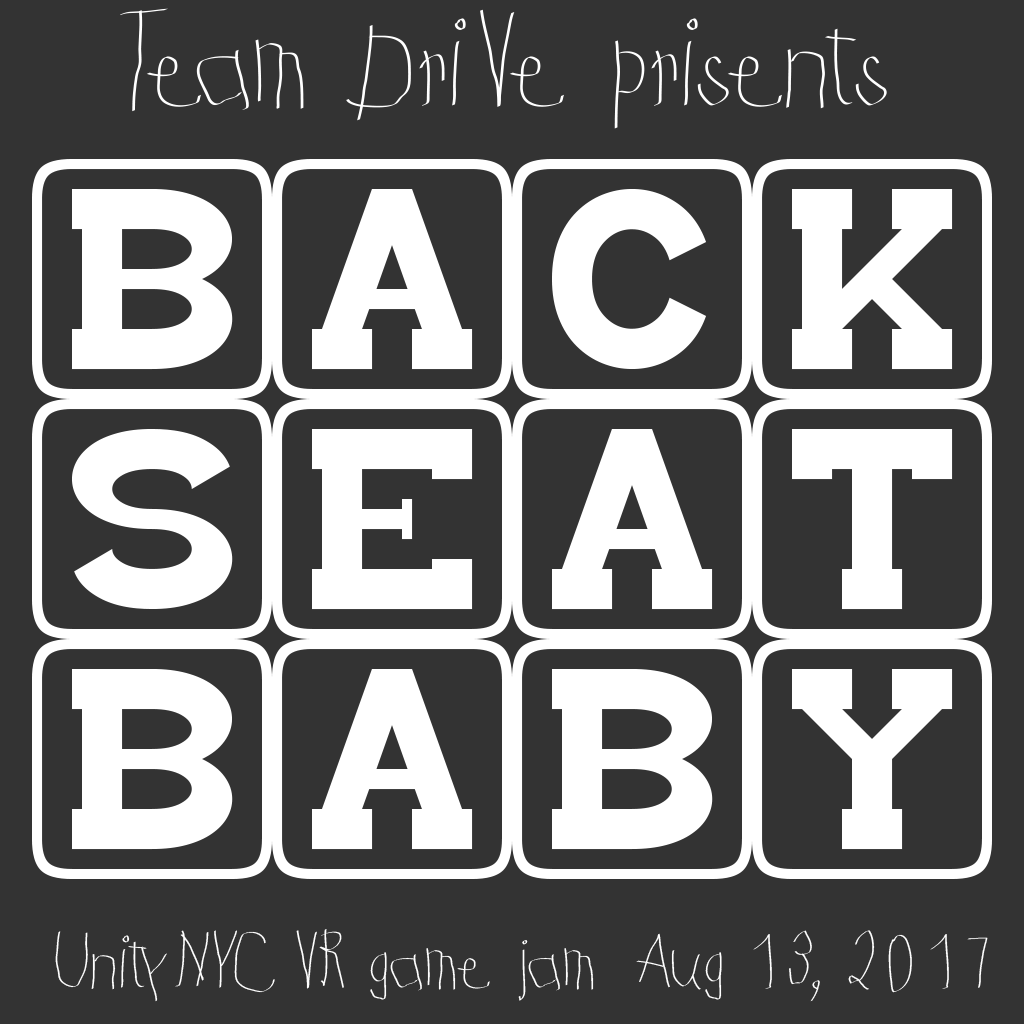
<style>
.page{position:relative;width:1024px;height:1024px;background:#333333}
.page>*{position:absolute;margin:0}
.t1{font:120px "KidsFirstPrintFont";color:#ffffff}
.t2{font:200px "babybloc";color:#ffffff}
.t3{font:72px "KidsFirstPrintFont";color:#ffffff}
</style>
<div class="page">
<p class="t1" style="left:120px;top:8px;width:767px;height:121px">Team DriVe prisents</p>
<p class="t2" style="left:32px;top:159px;width:960px;height:720px;text-align:center">BACK<br>SEAT<br>BABY</p>
<p class="t3" style="left:55px;top:929px;width:933px;height:73px">UnityNYC VR game jam  Aug 13, 2017</p>
</div>
